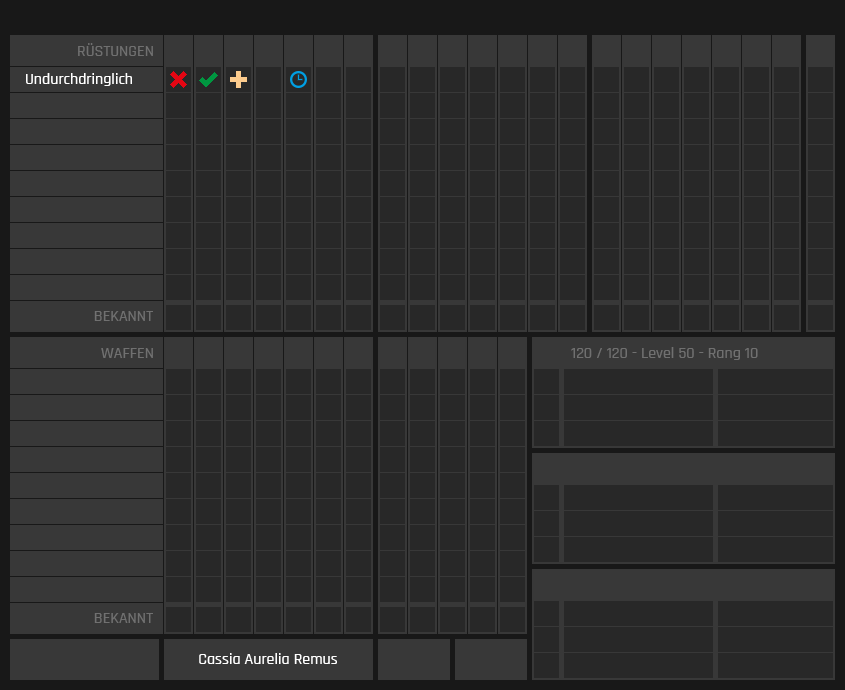
<style>
.page{position:relative;width:845px;height:690px;background:#282828}
.page>*{position:absolute;margin:0}
.t1{font:16px "Rajdhani-Medium";color:#707070}
.t2{font:16px "Rajdhani-Medium";color:#ffffff}
</style>
<div class="page">
<p class="t1" style="left:78px;top:43px;width:75px;height:13px">RÜSTUNGEN</p>
<p class="t2" style="left:26px;top:73px;width:106px;height:13px">Undurchdringlich</p>
<p class="t1" style="left:94px;top:311px;width:59px;height:10px">BEKANNT</p>
<p class="t1" style="left:101px;top:348px;width:52px;height:10px">WAFFEN</p>
<p class="t1" style="left:571px;top:347px;width:187px;height:13px">120 / 120 - Level 50 - Rang 10</p>
<p class="t1" style="left:94px;top:613px;width:59px;height:10px">BEKANNT</p>
<p class="t2" style="left:199px;top:653px;width:138px;height:11px">Cassia Aurelia Remus</p>
</div>
